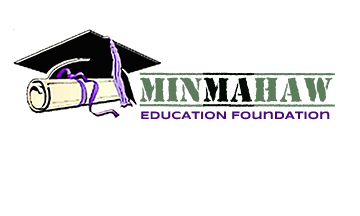
<style>
.page{position:relative;width:360px;height:216px;background:#ffffff}
.page>*{position:absolute;margin:0}
.t1{font:35px "TopSecret-Bold";color:#5c7c5c}
.t2{font:35px "TopSecret-Bold";color:#020c02}
.t3{font:11px "Syncopate-Bold";color:#470b71}
</style>
<div class="page">
<p class="t1" style="left:139px;top:72px;width:196px;height:35px">Min<span class="t2">ma</span>haw</p>
<p class="t3" style="left:141px;top:111px;width:189px;height:9px">EDUCATION FoundAtion</p>
</div>
